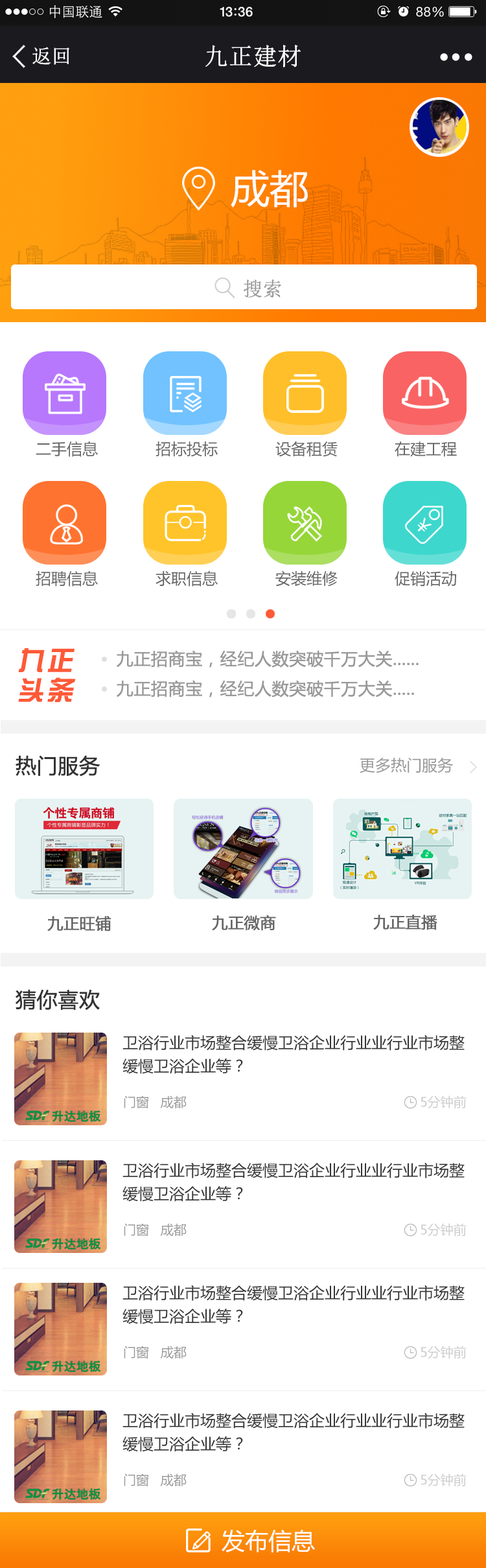
<style>
.page{position:relative;width:486px;height:1568px;background:#ffffff}
.page>*{position:absolute;margin:0}
.t1{font:19.4px "NSimSun";color:#ffffff;font-weight:bold}
.t2{font:23.8px "NSimSun";color:#ffffff;font-weight:bold}
.t3{font:38.9px "MicrosoftYaHei";color:#ffffff}
.t4{font:19.4px "NSimSun";color:#999999;font-weight:bold}
.t5{font:15.6px "MicrosoftYaHei";color:#666666}
.t6{font:25.9px/29.8px "HYk1gj";letter-spacing:0.1em;color:#fd5a37;font-weight:bold;font-style:italic}
.t7{font:16.9px "MicrosoftYaHei";color:#999999;font-weight:bold}
.t8{font:20.7px "MicrosoftYaHei";color:#333333;font-weight:bold}
.t9{font:15.6px "MicrosoftYaHei";color:#999999}
.t10{font:15.6px "MicrosoftYaHei";color:#666666;font-weight:bold}
.t11{font:15.6px/23.3px "MicrosoftYaHei";color:#333333}
.t12{font:13px "MicrosoftYaHei";color:#999999}
.t13{font:13px "MicrosoftYaHei";color:#cccccc}
.t14{font:23.3px "MicrosoftYaHei";color:#ffffff}
</style>
<div class="page">
<p class="t1" style="left:32px;top:47px;width:37px;height:18px">返回</p>
<p class="t2" style="left:205px;top:45px;width:96px;height:22px">九正建材</p>
<p class="t3" style="left:231px;top:170px;width:77px;height:37px">成都</p>
<p class="t4" style="left:243px;top:279px;width:38px;height:19px">搜索</p>
<p class="t5" style="left:36px;top:441px;width:62px;height:16px">二手信息</p>
<p class="t5" style="left:156px;top:441px;width:62px;height:16px">招标投标</p>
<p class="t5" style="left:275px;top:441px;width:63px;height:16px">设备租赁</p>
<p class="t5" style="left:395px;top:441px;width:62px;height:16px">在建工程</p>
<p class="t5" style="left:36px;top:570px;width:62px;height:17px">招聘信息</p>
<p class="t5" style="left:156px;top:570px;width:62px;height:17px">求职信息</p>
<p class="t5" style="left:275px;top:570px;width:63px;height:17px">安装维修</p>
<p class="t5" style="left:395px;top:571px;width:61px;height:16px">促销活动</p>
<p class="t6" style="left:18px;top:648px;width:58px;height:55px">九正<br>头条</p>
<p class="t7" style="left:117px;top:650px;width:302px;height:18px">九正招商宝，经纪人数突破千万大关......</p>
<p class="t7" style="left:117px;top:680px;width:297px;height:17px">九正招商宝，经纪人数突破千万大关.....</p>
<p class="t8" style="left:16px;top:755px;width:84px;height:22px">热门服务</p>
<p class="t9" style="left:360px;top:757px;width:93px;height:16px">更多热门服务</p>
<p class="t10" style="left:47px;top:916px;width:64px;height:15px">九正旺铺</p>
<p class="t10" style="left:212px;top:915px;width:64px;height:16px">九正微商</p>
<p class="t10" style="left:373px;top:915px;width:65px;height:15px">九正直播</p>
<p class="t8" style="left:16px;top:989px;width:84px;height:22px">猜你喜欢</p>
<p class="t11" style="left:123px;top:1035px;width:342px;height:39px">卫浴行业市场整合缓慢卫浴企业行业业行业市场整<br>缓慢卫浴企业等？</p>
<p class="t12" style="left:124px;top:1095px;width:63px;height:13px">门窗   成都</p>
<p class="t13" style="left:421px;top:1095px;width:46px;height:13px">5分钟前</p>
<p class="t11" style="left:123px;top:1162px;width:342px;height:40px">卫浴行业市场整合缓慢卫浴企业行业业行业市场整<br>缓慢卫浴企业等？</p>
<p class="t12" style="left:124px;top:1223px;width:63px;height:13px">门窗   成都</p>
<p class="t13" style="left:421px;top:1223px;width:46px;height:13px">5分钟前</p>
<p class="t11" style="left:123px;top:1285px;width:342px;height:39px">卫浴行业市场整合缓慢卫浴企业行业业行业市场整<br>缓慢卫浴企业等？</p>
<p class="t12" style="left:124px;top:1346px;width:63px;height:13px">门窗   成都</p>
<p class="t13" style="left:421px;top:1346px;width:46px;height:13px">5分钟前</p>
<p class="t11" style="left:123px;top:1412px;width:342px;height:40px">卫浴行业市场整合缓慢卫浴企业行业业行业市场整<br>缓慢卫浴企业等？</p>
<p class="t12" style="left:124px;top:1473px;width:63px;height:13px">门窗   成都</p>
<p class="t13" style="left:421px;top:1473px;width:46px;height:13px">5分钟前</p>
<p class="t14" style="left:222px;top:1529px;width:93px;height:23px">发布信息</p>
</div>
